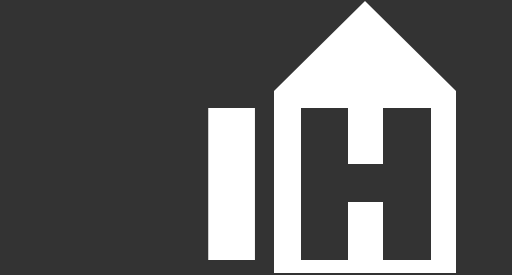
<style>
.page{position:relative;width:512px;height:275px;background:#333333}
.page>*{position:absolute;margin:0}
.t1{font:228px "FranklinGothic-Heavy";color:#ffffff}
</style>
<div class="page">
<p class="t1" style="left:208px;top:108px;width:47px;height:152px">I</p>
</div>
